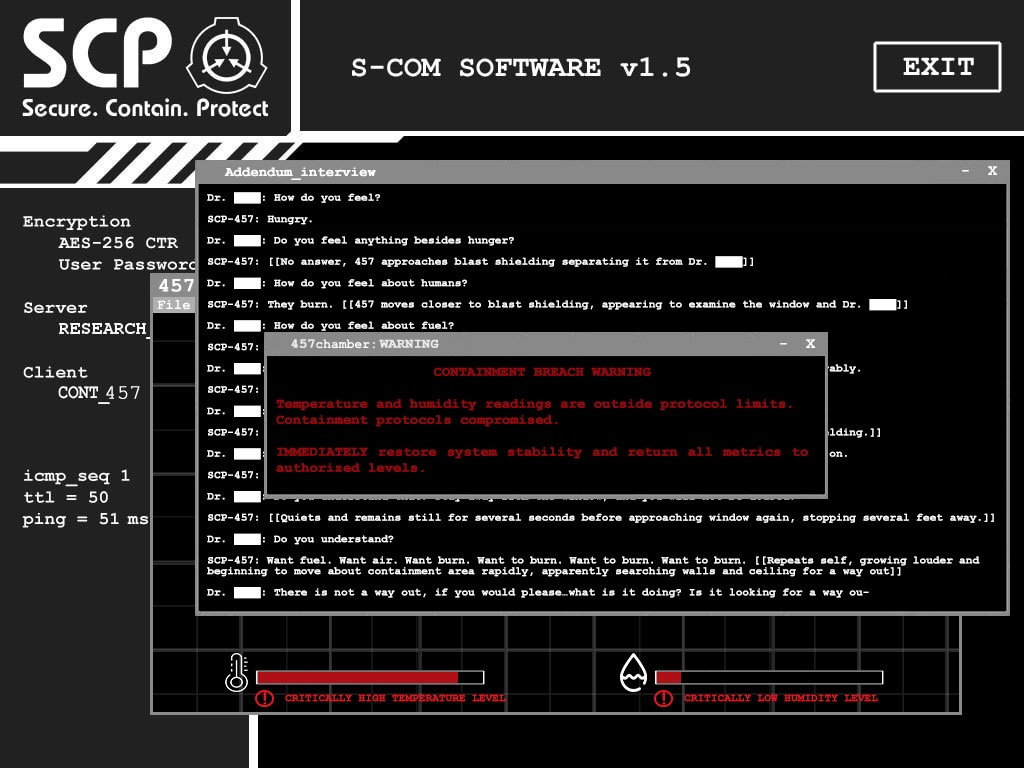
<style>
.page{position:relative;width:1024px;height:768px;background:#000000}
.page>*{position:absolute;margin:0}
.t1{font:13.3px "CourierNewPS-BoldMT";color:#ffffff;font-weight:bold}
.t2{font:10.7px/10.7px "CourierNewPS-BoldMT";color:#ffffff;font-weight:bold}
.t3{font:20px "CourierNewPS-BoldMT";color:#ffffff;font-weight:bold}
.t4{font:13.3px "CourierNewPS-BoldMT";color:#9a090f;font-weight:bold}
.t5{font:13.3px "CourierNewPS-BoldMT";color:#99080e;font-weight:bold}
.t6{font:20px "CourierNewPSMT";color:#ffffff;font-weight:bold}
.t7{font:16.9px "VCROSDMono";color:#e9151e;font-weight:bold;scale:1.1 1}
.t8{font:10.7px "CourierNewPS-BoldMT";color:#e9151e;text-transform:uppercase;font-weight:bold}
</style>
<div class="page">
<p class="t1" style="left:224px;top:167px;width:152px;height:13px">Addendum_interview</p>
<p class="t2" style="left:207px;top:192px;width:787px;height:407px;text-align:justify">Dr. ████: How do you feel?<br><br>SCP-457: Hungry.<br><br>Dr. ████: Do you feel anything besides hunger?<br><br>SCP-457: [[No answer, 457 approaches blast shielding separating it from Dr. ████]]<br><br>Dr. ████: How do you feel about humans?<br><br>SCP-457: They burn. [[457 moves closer to blast shielding, appearing to examine the window and Dr. ████]]<br><br>Dr. ████: How do you feel about fuel?<br><br>SCP-457: It burns. [[457 places a 'hand' upon the blast shielding to no effect]]<br><br>Dr. ████: Please move away from the window. Or we will be forced to reduce your size considerably.<br><br>SCP-457: [[No reply or signs of understanding. Does not move.]]<br><br>Dr. ████: …How do you feel about water?<br><br>SCP-457: [[Emits a high-pitched scream of superheated air and presses body against blast shielding.]]<br><br>Dr. ████: Please move away from the window, or we will be forced to turn the sprinklers back on.<br><br>SCP-457: [[Backs away from the window, still screaming, hissing, and snapping.]]<br><br>Dr. ████: Do you understand that? Stay away from the window, and you will not be doused.<br><br>SCP-457: [[Quiets and remains still for several seconds before approaching window again, stopping several feet away.]]<br><br>Dr. ████: Do you understand?<br><br>SCP-457: Want fuel. Want air. Want burn. Want to burn. Want to burn. Want to burn. [[Repeats self, growing louder and beginning to move about containment area rapidly, apparently searching walls and ceiling for a way out]]<br><br>Dr. ████: There is not a way out, if you would please…what is it doing? Is it looking for a way ou-</p>
<p class="t3" style="left:159px;top:279px;width:35px;height:13px">457</p>
<p class="t1" style="left:379px;top:339px;width:60px;height:9px;opacity:0.8">WARNING</p>
<p class="t4" style="left:276px;top:367px;width:532px;height:105px;text-align:center"><span class="t5">CONTAINMENT BREACH WARNING<br><br></span>Temperature and humidity readings are outside protocol limits.<br>Containment protocols compromised.<br><br>IMMEDIATELY restore system stability and return all metrics to authorized levels.</p>
<p class="t6" style="left:106px;top:386px;width:34px;height:13px">457</p>
<p class="t7" style="left:263px;top:692px;width:3px;height:13px">!</p>
<p class="t8" style="left:285px;top:694px;width:221px;height:8px">Critically high temperature level</p>
<p class="t7" style="left:662px;top:692px;width:3px;height:13px">!</p>
<p class="t8" style="left:684px;top:694px;width:194px;height:8px">Critically low humidity level</p>
</div>
